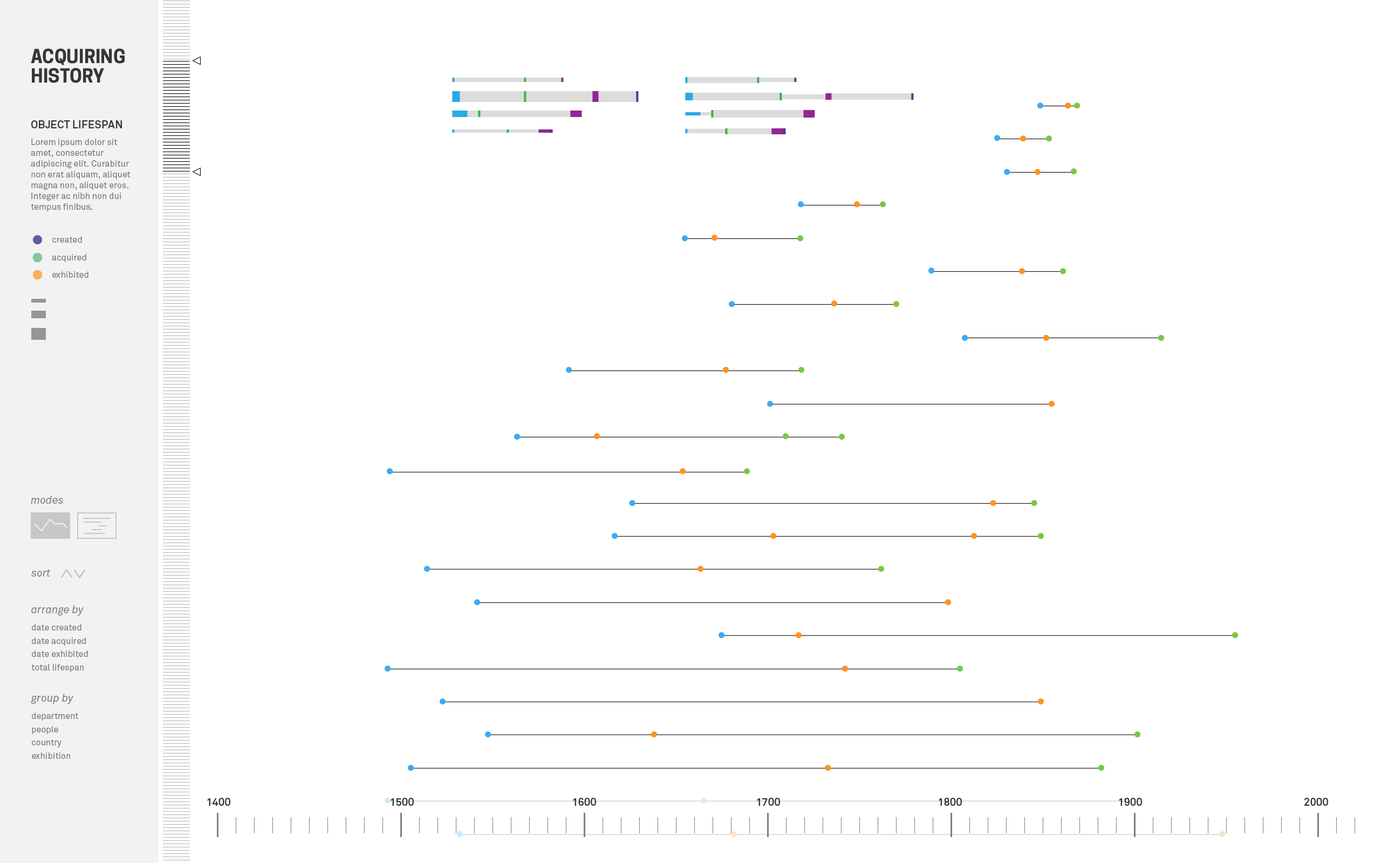
<style>
.page{position:relative;width:1381px;height:863px;background:#ffffff}
.page>*{position:absolute;margin:0}
.t1{font:18.3px/19.4px "CooperHewitt-Bold";color:#363636}
.t2{font:10.8px "Akkurat-Bold";color:#363636}
.t3{font:8.6px/10.8px "Akkurat";color:#7d7d7d}
.t4{font:8.6px "Akkurat";color:#7d7d7d}
.t5{font:10.8px "Akkurat-Italic";color:#7d7d7d}
</style>
<div class="page">
<p class="t1" style="left:31px;top:49px;width:94px;height:34px">ACQUIRING HISTORY</p>
<p class="t2" style="left:31px;top:120px;width:91px;height:8px">OBJECT LIFESPAN</p>
<p class="t3" style="left:31px;top:139px;width:100px;height:73px">Lorem ipsum dolor sit amet, consectetur adipiscing elit. Curabitur non erat aliquam, aliquet magna non, aliquet eros. Integer ac nibh non dui tempus finibus.</p>
<p class="t4" style="left:52px;top:236px;width:30px;height:7px">created</p>
<p class="t4" style="left:52px;top:254px;width:34px;height:8px">acquired</p>
<p class="t4" style="left:52px;top:271px;width:36px;height:7px">exhibited</p>
<p class="t5" style="left:31px;top:496px;width:32px;height:8px">modes</p>
<p class="t5" style="left:31px;top:570px;width:20px;height:7px">sort</p>
<p class="t5" style="left:31px;top:605px;width:53px;height:11px">arrange by</p>
<p class="t4" style="left:32px;top:624px;width:49px;height:7px">date created</p>
<p class="t4" style="left:32px;top:638px;width:54px;height:8px">date acquired</p>
<p class="t4" style="left:32px;top:651px;width:56px;height:6px">date exhibited</p>
<p class="t4" style="left:31px;top:664px;width:53px;height:8px">total lifespan</p>
<p class="t5" style="left:31px;top:694px;width:43px;height:11px">group by</p>
<p class="t4" style="left:32px;top:713px;width:47px;height:8px">department</p>
<p class="t4" style="left:32px;top:726px;width:26px;height:8px">people</p>
<p class="t4" style="left:32px;top:740px;width:30px;height:8px">country</p>
<p class="t4" style="left:32px;top:753px;width:38px;height:6px">exhibition</p>
<p class="t2" style="left:207px;top:798px;width:23px;height:8px">1400</p>
<p class="t2" style="left:391px;top:798px;width:23px;height:8px">1500</p>
<p class="t2" style="left:573px;top:798px;width:23px;height:8px">1600</p>
<p class="t2" style="left:757px;top:798px;width:23px;height:8px">1700</p>
<p class="t2" style="left:939px;top:798px;width:23px;height:8px">1800</p>
<p class="t2" style="left:1119px;top:798px;width:23px;height:8px">1900</p>
<p class="t2" style="left:1305px;top:798px;width:23px;height:8px">2000</p>
</div>
